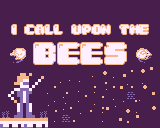
<style>
.page{position:relative;width:160px;height:128px;background:#471e4c}
.page>*{position:absolute;margin:0}
.t1{font:10.4px "04b30";color:#ffefff;text-transform:uppercase}
.t2{font:25px "04b30";color:#ffefff;text-transform:uppercase}
</style>
<div class="page">
<p class="t1" style="left:12px;top:25px;width:136px;height:39px;text-align:center">I CALL Upon the<br><span class="t2">BEES</span></p>
</div>
